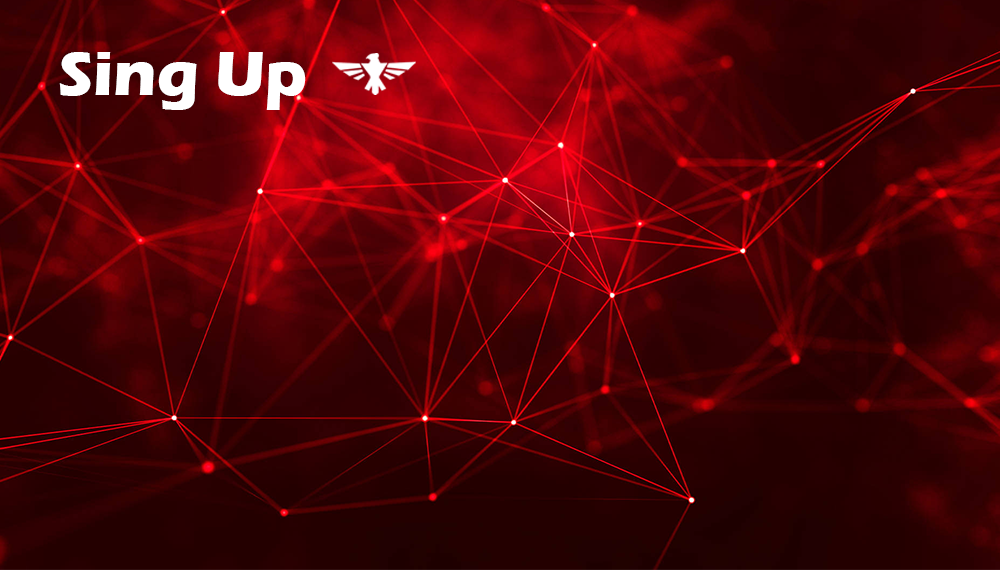
<style>
.page{position:relative;width:1000px;height:570px}
.page>*{position:absolute;margin:0}
.t1{font:64px "ErasITC-Bold";color:#ffffff}
</style>
<div class="page">
<p class="t1" style="left:59px;top:52px;width:247px;height:58px">Sing Up</p>
</div>
